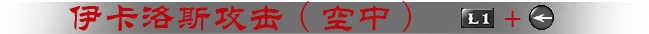
<style>
.page{position:relative;width:649px;height:34px;background:#707070}
.page>*{position:absolute;margin:0}
.t1{font:36px "STLiti";color:#ba060b}
.t2{font:36px "FangSong";color:#ba060b}
</style>
<div class="page">
<p class="t1" style="left:69px;top:0px;width:452px;height:33px">伊卡洛斯攻击<span class="t2">(</span>空中<span class="t2">)</span>   +</p>
</div>
